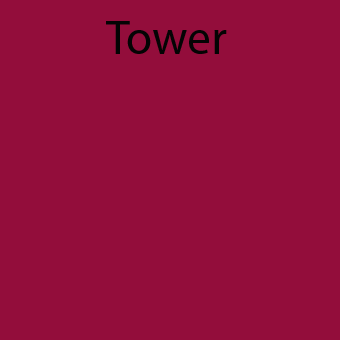
<style>
.page{position:relative;width:340px;height:340px;background:#930d3b}
.page>*{position:absolute;margin:0}
.t1{font:48px "MyriadPro-Regular";color:#040404}
</style>
<div class="page">
<p class="t1" style="left:106px;top:21px;width:121px;height:33px">Tower</p>
</div>
